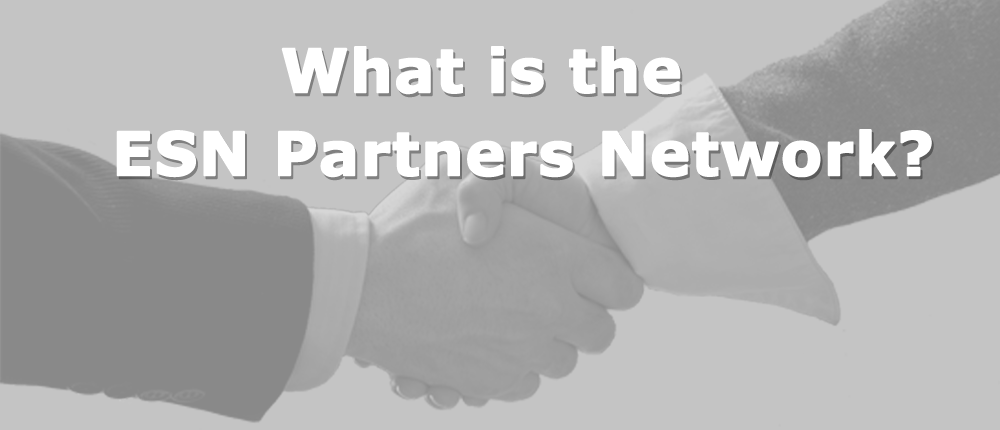
<style>
.page{position:relative;width:1000px;height:430px;background:#c4c4c4}
.page>*{position:absolute;margin:0}
.t1{font:60px "Verdana-Bold";color:#ffffff;font-weight:bold}
</style>
<div class="page">
<p class="t1" style="left:281px;top:46px;width:400px;height:49px">What is the</p>
<p class="t1" style="left:116px;top:129px;width:816px;height:49px">ESN Partners Network?</p>
</div>
